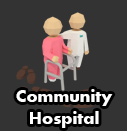
<style>
.page{position:relative;width:127px;height:131px;background:#333333}
.page>*{position:absolute;margin:0}
.t1{font:18px "Aharoni-Bold";color:#ffffff}
</style>
<div class="page">
<p class="t1" style="left:16px;top:89px;width:97px;height:39px;text-align:center">Community<br>Hospital</p>
</div>
